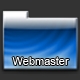
<style>
.page{position:relative;width:80px;height:80px;background:#333333}
.page>*{position:absolute;margin:0}
.t1{font:11px "ArialMT";color:#ffffff}
</style>
<div class="page">
<p class="t1" style="left:12px;top:57px;width:57px;height:8px">Webmaster</p>
</div>
